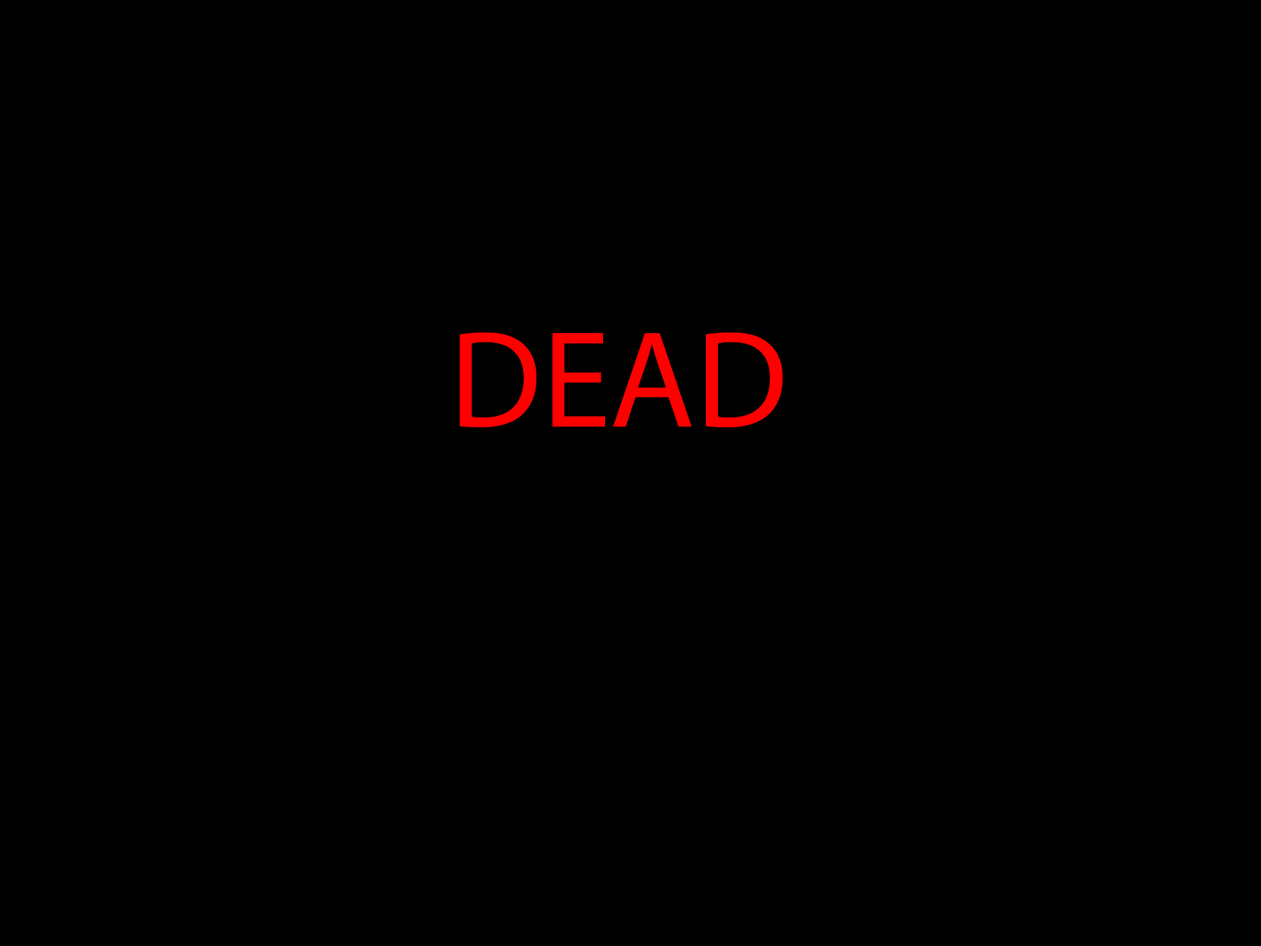
<style>
.page{position:relative;width:1261px;height:946px;background:#000000}
.page>*{position:absolute;margin:0}
.t1{font:139px "MyriadPro-Regular";color:#ff0000}
</style>
<div class="page">
<p class="t1" style="left:460px;top:332px;width:323px;height:95px">DEAD</p>
</div>
